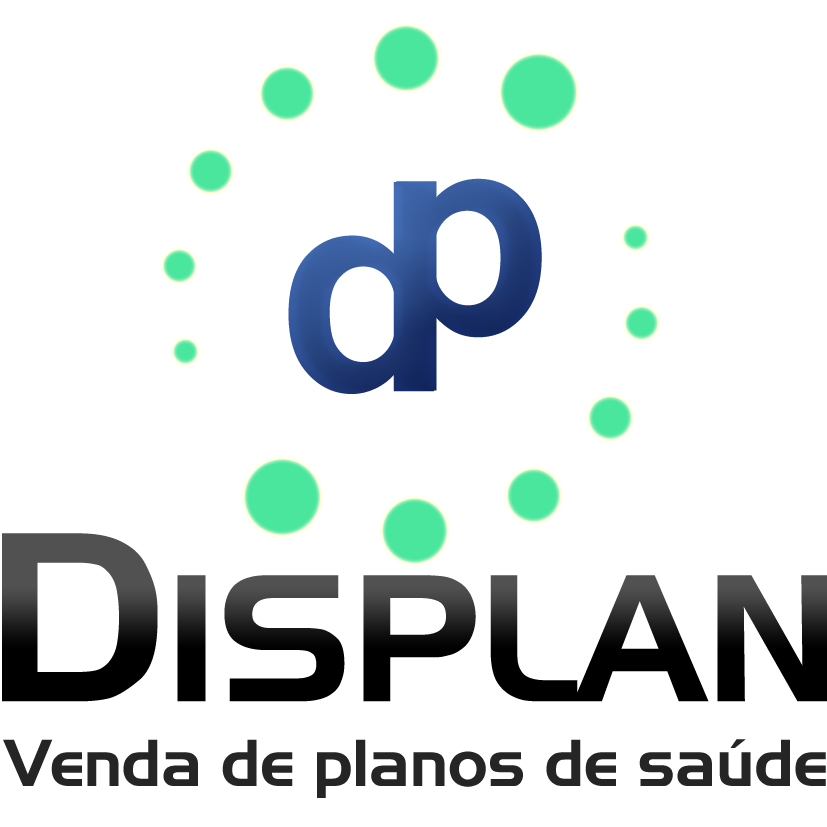
<style>
.page{position:relative;width:827px;height:827px;background:#ffffff}
.page>*{position:absolute;margin:0}
.t1{font:64.2px "AeroRegularSWFTE";color:#262525}
</style>
<div class="page">
<p class="t1" style="left:3px;top:739px;width:823px;height:59px">Venda de planos de saúde</p>
</div>
